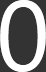
<style>
.page{position:relative;width:46px;height:72px;background:#333333}
.page>*{position:absolute;margin:0}
.t1{font:100px "LeelawadeeUI";color:#ffffff}
</style>
<div class="page">
<p class="t1" style="left:0px;top:0px;width:46px;height:72px">0</p>
</div>
